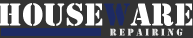
<style>
.page{position:relative;width:193px;height:38px;background:#333333}
.page>*{position:absolute;margin:0}
.t1{font:33px "Stencil";color:#ffffff}
.t2{font:33px "Stencil";color:#1d2a63}
.t3{font:10px "Stencil";color:#ffffff}
</style>
<div class="page">
<p class="t1" style="left:0px;top:3px;width:193px;height:23px">house<span class="t2">W</span>are</p>
<p class="t3" style="left:110px;top:28px;width:73px;height:8px">r e p a i r i n g</p>
</div>
